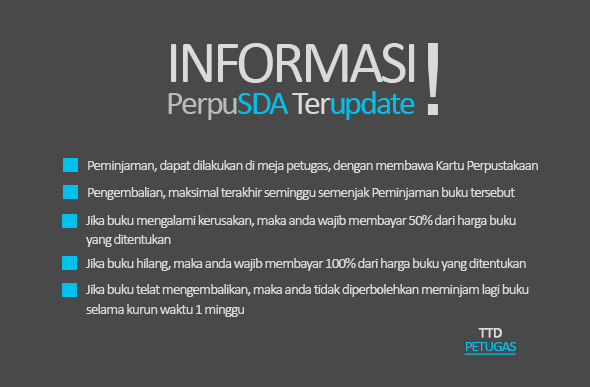
<style>
.page{position:relative;width:590px;height:387px;background:#494949}
.page>*{position:absolute;margin:0}
.t1{font:60px/32px "Calibri";letter-spacing:-0.06em;color:#dadada}
.t2{font:34px/32px "Calibri";letter-spacing:-0.06em;color:#bbbbbb}
.t3{font:34px/32px "Calibri";letter-spacing:-0.06em;color:#00c1eb}
.t4{font:34px/32px "Calibri";letter-spacing:-0.06em;color:#dadada}
.t5{font:100px "Helvetica";letter-spacing:-0.06em;color:#dadada}
.t6{font:15px "Calibri";letter-spacing:-0.06em;color:#dadada}
.t7{font:15px/19px "Calibri";letter-spacing:-0.06em;color:#dadada}
.t8{font:15px/20px "Calibri";letter-spacing:-0.06em;color:#dadada}
.t9{font:15px/14px "Calibri";letter-spacing:-0.06em;color:#00c1eb;text-decoration:underline}
.t10{font:15px/14px "Calibri";letter-spacing:-0.06em;color:#dadada;font-weight:bold}
</style>
<div class="page">
<p class="t1" style="left:168px;top:43px;width:247px;height:77px">INFORMASI<br><span class="t2">Perpu</span><span class="t3">SDA </span><span class="t4">Ter</span><span class="t3">update</span></p>
<p class="t5" style="left:427px;top:43px;width:11px;height:72px">!</p>
<p class="t6" style="left:88px;top:160px;width:450px;height:13px">Peminjaman, dapat dilakukan di meja petugas, dengan membawa Kartu Perpustakaan</p>
<p class="t6" style="left:88px;top:187px;width:427px;height:13px">Pengembalian, maksimal terakhir seminggu semenjak Peminjaman buku tersebut</p>
<p class="t7" style="left:85px;top:215px;width:431px;height:32px">Jika buku mengalami kerusakan, maka anda wajib membayar 50% dari harga buku <br>yang ditentukan</p>
<p class="t6" style="left:85px;top:258px;width:441px;height:13px">Jika buku hilang, maka anda wajib membayar 100% dari harga buku yang ditentukan</p>
<p class="t8" style="left:85px;top:284px;width:444px;height:33px">Jika buku telat mengembalikan, maka anda tidak diperbolehkan meminjam lagi buku <br>selama kurun waktu 1 minggu</p>
<p class="t9" style="left:464px;top:328px;width:52px;height:27px;text-align:center"><span class="t10">TTD<br></span>PETUGAS</p>
</div>
